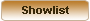
<style>
.page{position:relative;width:90px;height:21px}
.page>*{position:absolute;margin:0}
.t1{font:11px "Arial-BoldMT";color:#382909}
</style>
<div class="page">
<p class="t1" style="left:22px;top:6px;width:47px;height:8px">Showlist</p>
</div>
